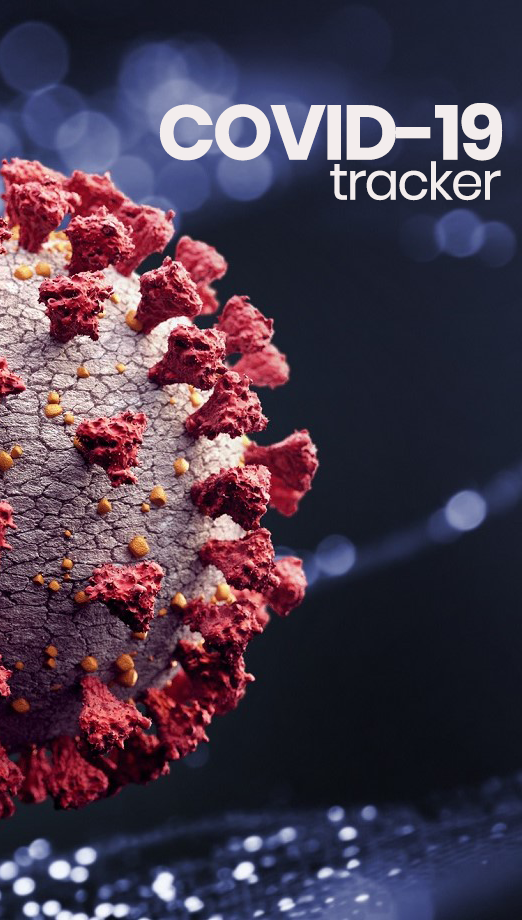
<style>
.page{position:relative;width:522px;height:920px}
.page>*{position:absolute;margin:0}
.t1{font:77.1px "Poppins-Bold";letter-spacing:-0.04em;color:#f3eded}
.t2{font:51.8px "Poppins-Regular";letter-spacing:-0.04em;color:#f3eded}
</style>
<div class="page">
<p class="t1" style="left:159px;top:103px;width:344px;height:58px">COVID-19</p>
<p class="t2" style="left:330px;top:161px;width:171px;height:40px">tracker</p>
</div>
